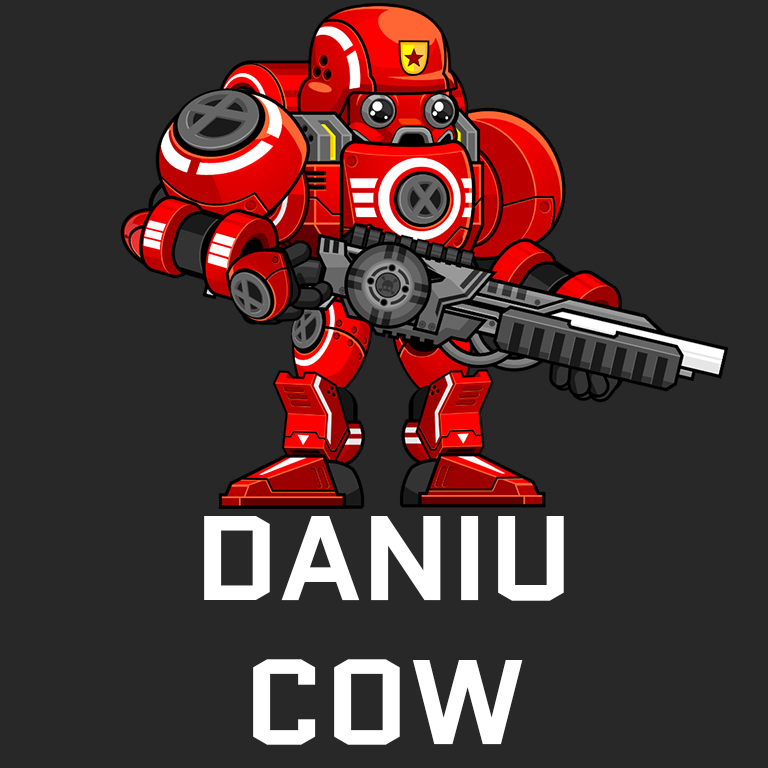
<style>
.page{position:relative;width:768px;height:768px;background:#282828}
.page>*{position:absolute;margin:0}
.t1{font:120px "Quantico-Bold";color:#ffffff}
</style>
<div class="page">
<p class="t1" style="left:204px;top:516px;width:360px;height:229px;text-align:center">DANIU<br>COW</p>
</div>
